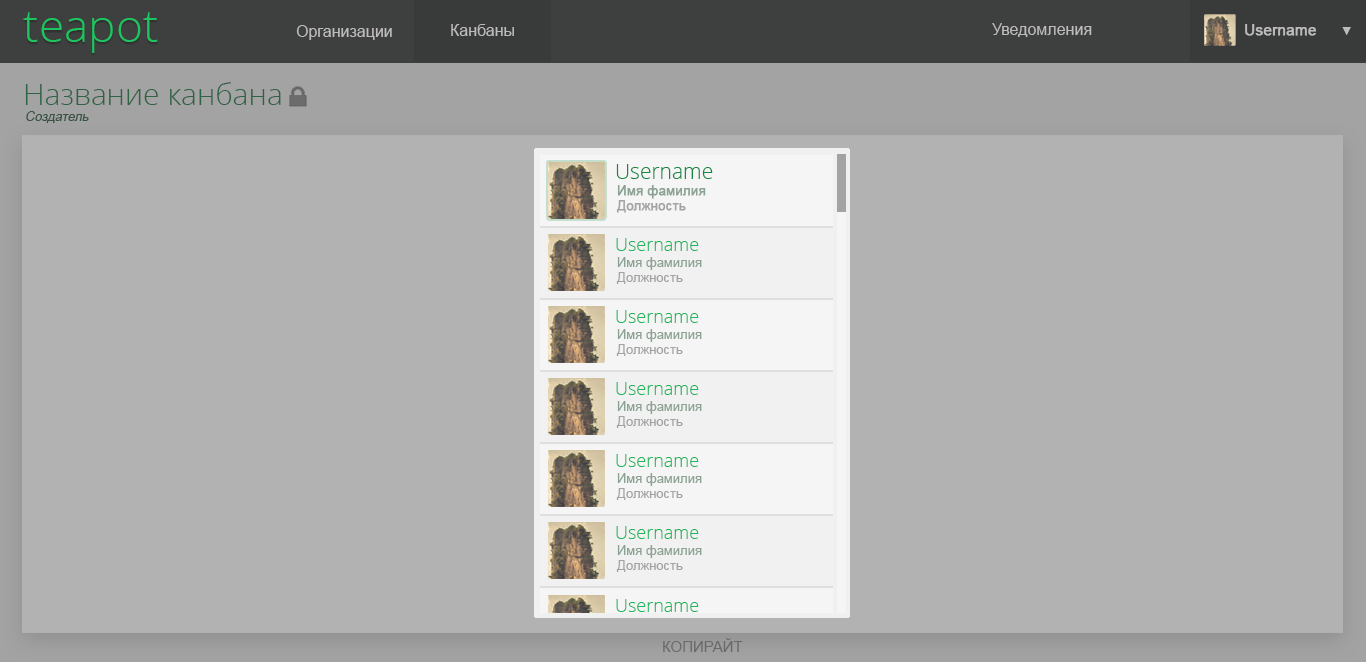
<style>
.page{position:relative;width:1366px;height:662px;background:#b2b2b2}
.page>*{position:absolute;margin:0}
.t1{font:46px "OpenSans-Light";color:#1dc45f}
.t2{font:16px "ArialMT";color:#bdbbbb}
.t3{font:15px "ArialMT";color:#bdbbbb;font-weight:bold}
.t4{font:12.3px "ArialMT";color:#bdbbbb}
.t5{font:30px "OpenSans-Light";color:#1c713e}
.t6{font:13px "ArialMT";color:#2c583d;font-style:italic}
.t7{font:21px "OpenSans-Light";color:#188743}
.t8{font:13px "ArialMT";color:#8ca294;font-weight:bold}
.t9{font:13px "ArialMT";color:#a3a3a3;font-weight:bold}
.t10{font:18px "OpenSans-Light";color:#20b55a}
.t11{font:13px "ArialMT";color:#8ca294}
.t12{font:13px "ArialMT";color:#a3a3a3}
.t13{font:15px "ArialMT";color:#7b7a7a}
</style>
<div class="page">
<p class="t1" style="left:23px;top:12px;width:135px;height:41px">teapot</p>
<p class="t2" style="left:296px;top:25px;width:96px;height:15px">Организации</p>
<p class="t2" style="left:451px;top:24px;width:63px;height:12px">Канбаны</p>
<p class="t2" style="left:992px;top:23px;width:100px;height:14px">Уведомления</p>
<p class="t3" style="left:1245px;top:24px;width:71px;height:12px">Username</p>
<p class="t4" style="left:1342px;top:27px;width:9px;height:8px">▼</p>
<p class="t5" style="left:25px;top:82px;width:256px;height:23px">Название канбана</p>
<p class="t6" style="left:26px;top:111px;width:63px;height:12px">Создатель</p>
<p class="t7" style="left:616px;top:164px;width:97px;height:15px">Username</p>
<p class="t8" style="left:617px;top:185px;width:89px;height:14px">Имя фамилия</p>
<p class="t9" style="left:616px;top:200px;width:70px;height:13px">Должность</p>
<p class="t10" style="left:616px;top:238px;width:83px;height:13px">Username</p>
<p class="t11" style="left:617px;top:257px;width:85px;height:13px">Имя фамилия</p>
<p class="t12" style="left:616px;top:272px;width:67px;height:12px">Должность</p>
<p class="t10" style="left:616px;top:310px;width:83px;height:13px">Username</p>
<p class="t11" style="left:617px;top:329px;width:85px;height:13px">Имя фамилия</p>
<p class="t12" style="left:616px;top:344px;width:67px;height:12px">Должность</p>
<p class="t10" style="left:616px;top:382px;width:83px;height:13px">Username</p>
<p class="t11" style="left:617px;top:401px;width:85px;height:13px">Имя фамилия</p>
<p class="t12" style="left:616px;top:416px;width:67px;height:12px">Должность</p>
<p class="t10" style="left:616px;top:454px;width:83px;height:13px">Username</p>
<p class="t11" style="left:617px;top:473px;width:85px;height:13px">Имя фамилия</p>
<p class="t12" style="left:616px;top:488px;width:67px;height:12px">Должность</p>
<p class="t10" style="left:616px;top:526px;width:83px;height:13px">Username</p>
<p class="t11" style="left:617px;top:545px;width:85px;height:13px">Имя фамилия</p>
<p class="t12" style="left:616px;top:560px;width:67px;height:12px">Должность</p>
<p class="t10" style="left:616px;top:599px;width:83px;height:13px">Username</p>
<p class="t13" style="left:663px;top:638px;width:80px;height:14px">КОПИРАЙТ</p>
</div>
